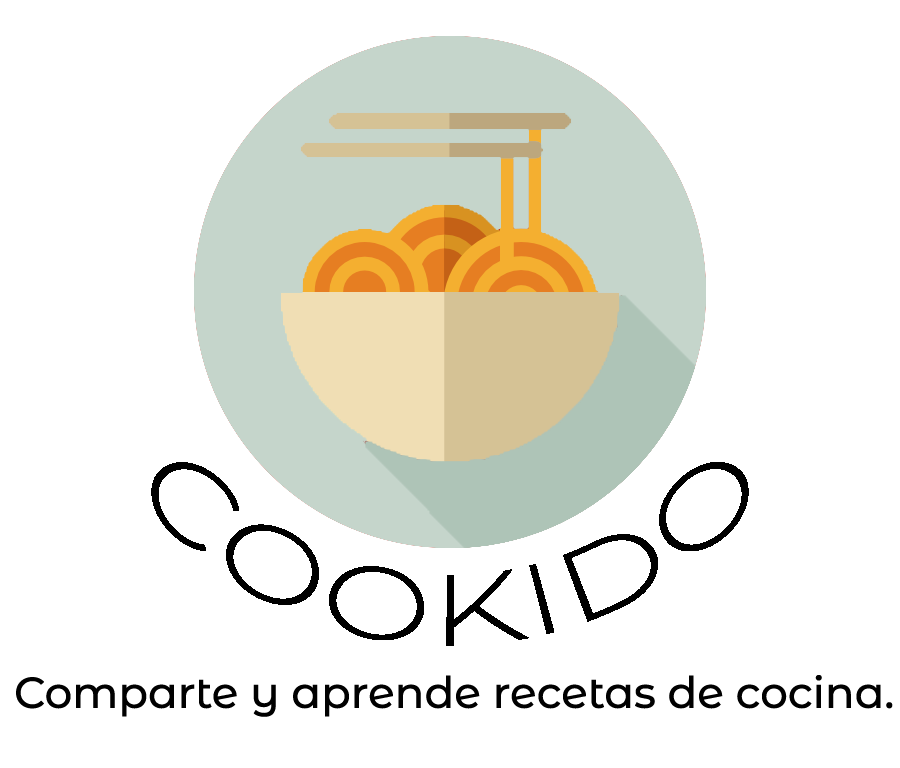
<style>
.page{position:relative;width:900px;height:768px;background:#ffffff}
.page>*{position:absolute;margin:0}
.t1{font:100px "Montserrat-Light";color:#000000}
.t2{font:43.6px "MontserratAlternates-Medium";color:#000000}
</style>
<div class="page">
<p class="t1" style="left:151px;top:462px;width:598px;height:184px">COOKIDO</p>
<p class="t2" style="left:16px;top:675px;width:877px;height:42px">Comparte y aprende recetas de cocina.</p>
</div>
